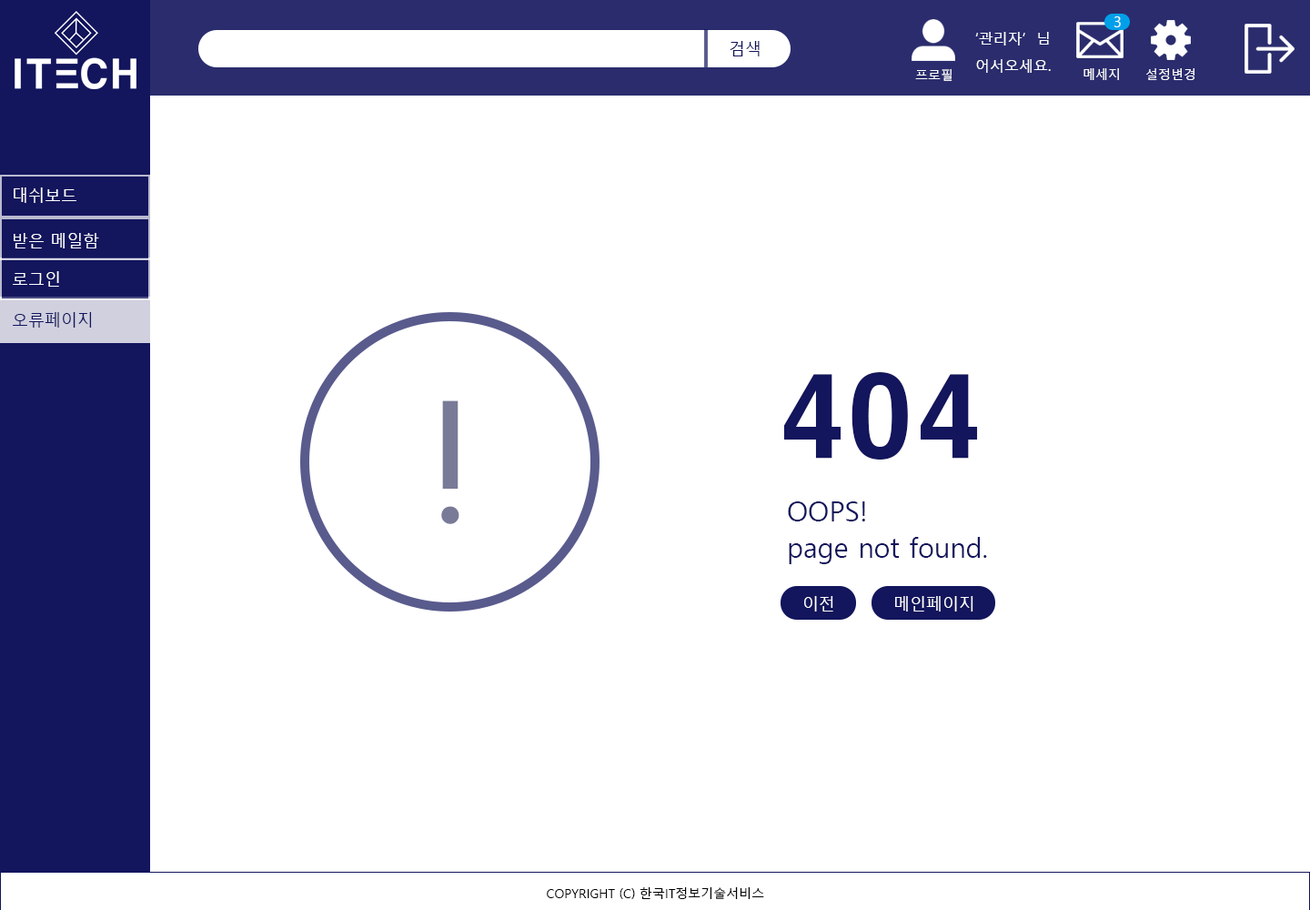
<style>
.page{position:relative;width:1310px;height:910px;background:#ffffff}
.page>*{position:absolute;margin:0}
.t1{font:14.6px "MalgunGothic";color:#ffffff}
.t2{font:16.4px "MalgunGothic";color:#13155d}
.t3{font:12.7px "MalgunGothic";color:#ffffff}
.t4{font:16.4px "MalgunGothic";color:#ffffff}
.t5{font:109.2px "HYgtrE";color:#13155d}
.t6{font:182px "HYkanM";color:#797a98}
.t7{font:27.3px "MalgunGothic";color:#13155d}
.t8{font:12.7px "MalgunGothic";color:#000000}
</style>
<div class="page">
<p class="t1" style="left:1114px;top:16px;width:7px;height:11px">3</p>
<p class="t2" style="left:730px;top:41px;width:30px;height:15px">검색</p>
<p class="t1" style="left:976px;top:32px;width:73px;height:13px">‘관리자’  님</p>
<p class="t1" style="left:976px;top:59px;width:75px;height:14px">어서오세요.</p>
<p class="t3" style="left:915px;top:68px;width:38px;height:13px">프로필</p>
<p class="t3" style="left:1084px;top:68px;width:35px;height:12px">메세지</p>
<p class="t3" style="left:1147px;top:68px;width:48px;height:12px">설정변경</p>
<p class="t4" style="left:14px;top:187px;width:62px;height:16px">대쉬보드</p>
<p class="t4" style="left:14px;top:233px;width:85px;height:15px">받은 메일함</p>
<p class="t4" style="left:13px;top:271px;width:46px;height:16px">로그인</p>
<p class="t2" style="left:13px;top:312px;width:79px;height:16px">오류페이지</p>
<p class="t5" style="left:784px;top:372px;width:194px;height:88px">404</p>
<p class="t6" style="left:441px;top:400px;width:19px;height:124px">!</p>
<p class="t7" style="left:788px;top:501px;width:77px;height:20px">OOPS!</p>
<p class="t7" style="left:789px;top:537px;width:198px;height:27px">page not found.</p>
<p class="t4" style="left:804px;top:596px;width:30px;height:16px">이전</p>
<p class="t4" style="left:895px;top:596px;width:79px;height:16px">메인페이지</p>
<p class="t8" style="left:547px;top:887px;width:217px;height:12px">COPYRIGHT (C) 한국IT정보기술서비스</p>
</div>
